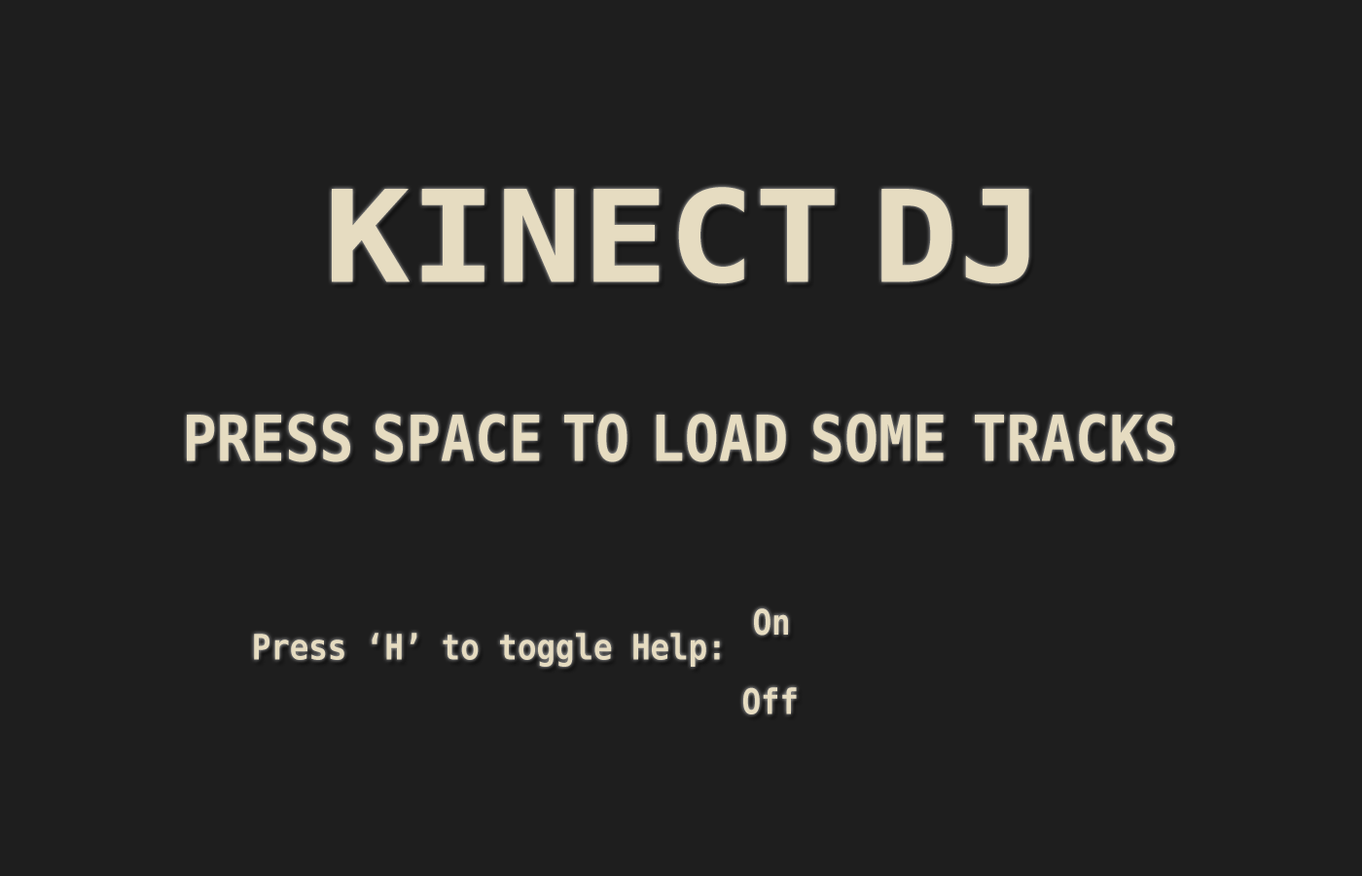
<style>
.page{position:relative;width:1362px;height:876px;background:#1e1e1e}
.page>*{position:absolute;margin:0}
.t1{font:127.2px "Menlo-Bold";color:#e6dcc1;scale:1.12 1}
.t2{font:63.2px "Menlo-Bold";color:#e6dcc1;scale:0.9 1}
.t3{font:35px "Menlo-Bold";color:#e6dcc1;scale:0.9 1}
</style>
<div class="page">
<p class="t1" style="left:332px;top:187px;width:697px;height:97px">KINECT DJ</p>
<p class="t2" style="left:187px;top:413px;width:988px;height:49px">PRESS SPACE TO LOAD SOME TRACKS</p>
<p class="t3" style="left:754px;top:608px;width:34px;height:27px">On</p>
<p class="t3" style="left:254px;top:632px;width:466px;height:34px">Press ‘H’ to toggle Help:</p>
<p class="t3" style="left:743px;top:687px;width:54px;height:27px">Off</p>
</div>
